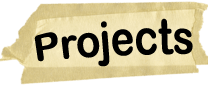
<style>
.page{position:relative;width:208px;height:85px;background:#ffffff}
.page>*{position:absolute;margin:0}
.t1{font:40px "ArialRoundedMTBold";color:#000000}
</style>
<div class="page">
<p class="t1" style="left:34px;top:18px;width:159px;height:49px;rotate:-4deg">Projects</p>
</div>
